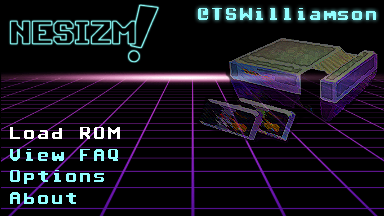
<style>
.page{position:relative;width:384px;height:216px;background:#000000}
.page>*{position:absolute;margin:0}
.t1{font:18px "Commodore-64-Angled";color:#92feff}
.t2{font:18px "Commodore-64-Angled";color:#ffffff}
</style>
<div class="page">
<p class="t1" style="left:198px;top:8px;width:178px;height:12px">@TSWilliamson</p>
<p class="t1" style="left:10px;top:127px;width:110px;height:77px"><span class="t2">Load ROM<br></span>View FAQ<br>Options<br>About</p>
</div>
